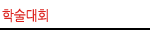
<style>
.page{position:relative;width:150px;height:30px;background:#ffffff}
.page>*{position:absolute;margin:0}
.t1{font:14px "NanumGothic";color:#dc241f;scale:0.9 1}
</style>
<div class="page">
<p class="t1" style="left:2px;top:8px;width:46px;height:15px">학술대회</p>
</div>
